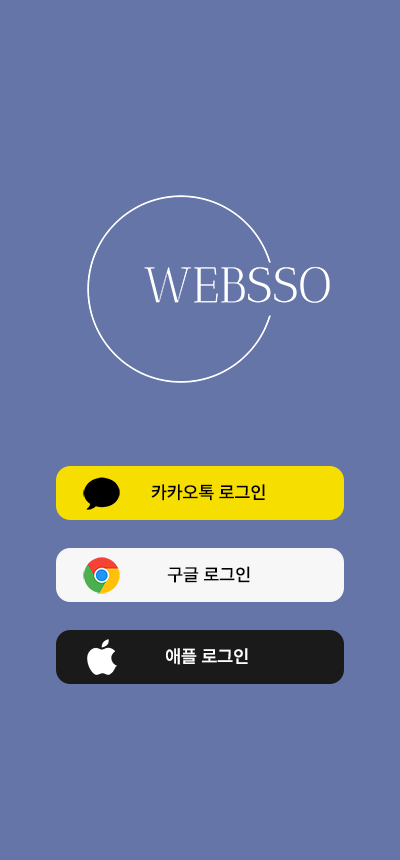
<style>
.page{position:relative;width:400px;height:860px;background:#6575a8}
.page>*{position:absolute;margin:0}
.t1{font:18px "Pretendard-Medium";color:#000000;font-weight:bold}
.t2{font:18px "Pretendard-Medium";color:#ffffff;font-weight:bold}
</style>
<div class="page">
<p class="t1" style="left:151px;top:484px;width:114px;height:17px">카카오톡 로그인</p>
<p class="t1" style="left:167px;top:566px;width:83px;height:17px">구글 로그인</p>
<p class="t2" style="left:166px;top:648px;width:82px;height:17px">애플 로그인</p>
</div>
